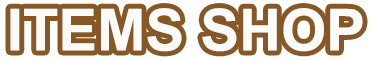
<style>
.page{position:relative;width:372px;height:60px;background:#875826}
.page>*{position:absolute;margin:0}
.t1{font:58px "Arial-BoldMT";color:#ffffff}
</style>
<div class="page">
<p class="t1" style="left:10px;top:8px;width:353px;height:44px">ITEMS SHOP</p>
</div>
